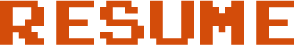
<style>
.page{position:relative;width:294px;height:45px;background:#d34c0a}
.page>*{position:absolute;margin:0}
.t1{font:50px "PressStartReg";color:#d34c0a}
</style>
<div class="page">
<p class="t1" style="left:0px;top:0px;width:294px;height:45px">RESUME</p>
</div>
